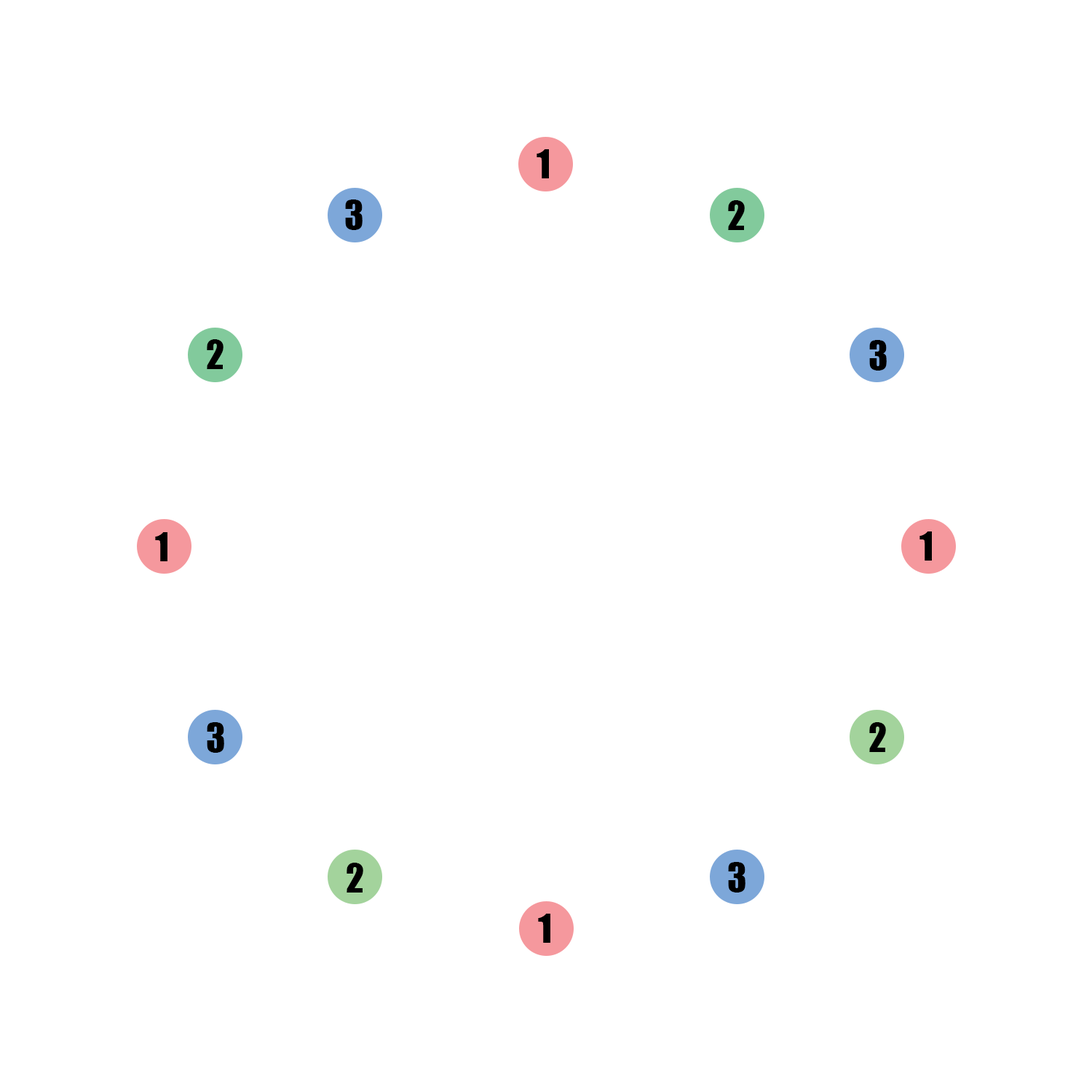
<style>
.page{position:relative;width:1092px;height:1092px;background:#ffffff}
.page>*{position:absolute;margin:0}
.t1{font:36.4px "Impact";color:#000000}
</style>
<div class="page">
<p class="t1" style="left:537px;top:149px;width:12px;height:29px">1</p>
<p class="t1" style="left:345px;top:199px;width:18px;height:31px">3</p>
<p class="t1" style="left:728px;top:200px;width:17px;height:30px">2</p>
<p class="t1" style="left:207px;top:339px;width:16px;height:30px">2</p>
<p class="t1" style="left:869px;top:340px;width:18px;height:31px">3</p>
<p class="t1" style="left:155px;top:532px;width:12px;height:29px">1</p>
<p class="t1" style="left:919px;top:531px;width:13px;height:30px">1</p>
<p class="t1" style="left:207px;top:722px;width:17px;height:31px">3</p>
<p class="t1" style="left:869px;top:722px;width:17px;height:30px">2</p>
<p class="t1" style="left:347px;top:863px;width:16px;height:30px">2</p>
<p class="t1" style="left:728px;top:862px;width:17px;height:31px">3</p>
<p class="t1" style="left:538px;top:914px;width:12px;height:29px">1</p>
</div>
